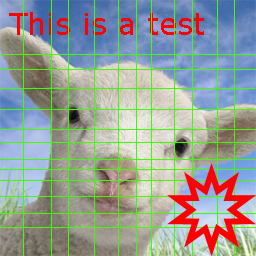
<style>
.page{position:relative;width:256px;height:256px}
.page>*{position:absolute;margin:0}
.t1{font:30px "Verdana";color:#ff0000}
</style>
<div class="page">
<p class="t1" style="left:9px;top:12px;width:195px;height:23px">This is a test</p>
</div>
